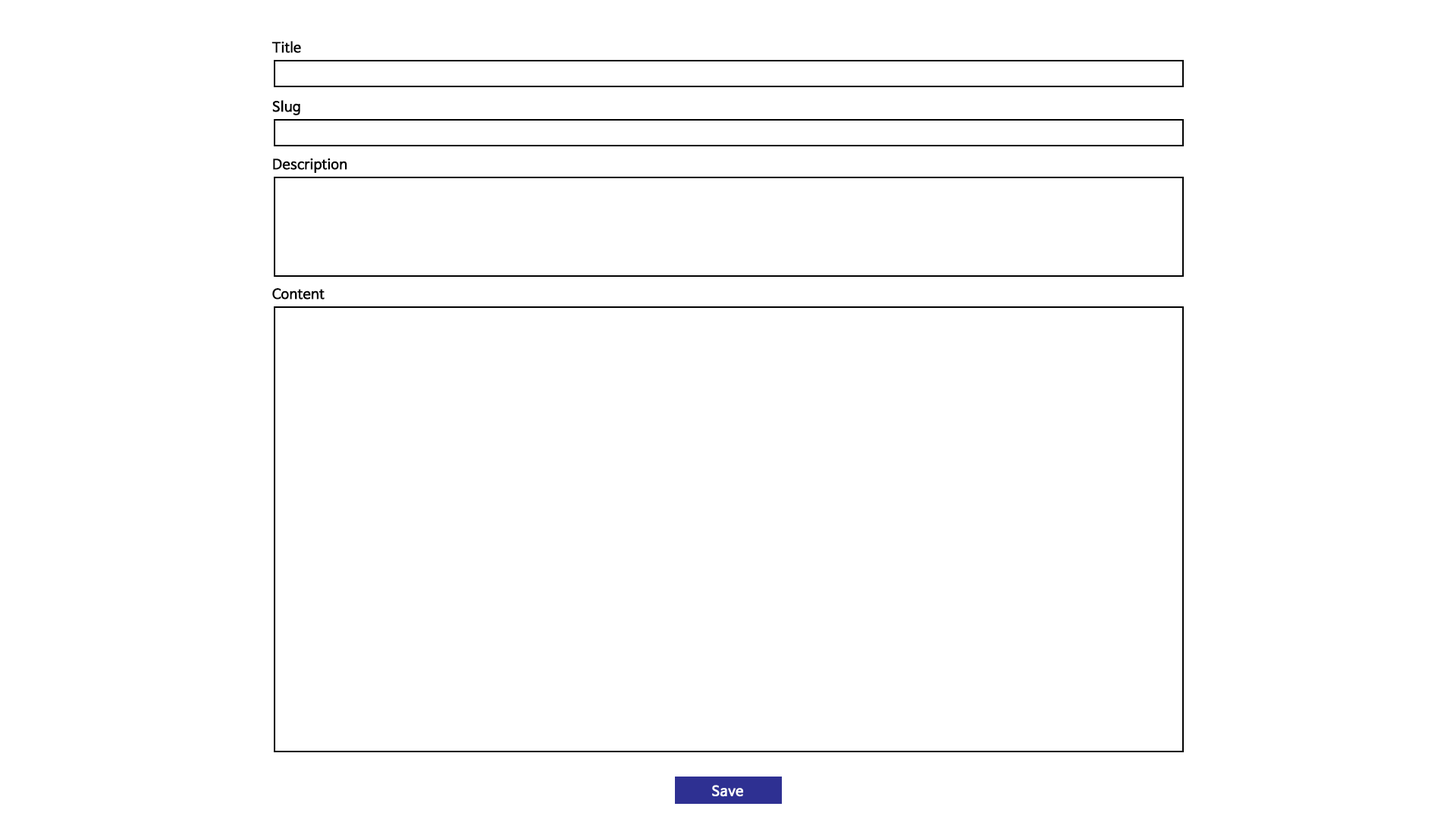
<style>
.page{position:relative;width:1456px;height:819px;background:#ffffff}
.page>*{position:absolute;margin:0}
.t1{font:13.6px "NanumBarunGothic";color:#000000;font-weight:bold}
.t2{font:13.6px "NanumBarunGothic";color:#ffffff;font-weight:bold}
</style>
<div class="page">
<p class="t1" style="left:271px;top:41px;width:30px;height:12px">Title</p>
<p class="t1" style="left:272px;top:100px;width:28px;height:15px">Slug</p>
<p class="t1" style="left:273px;top:158px;width:74px;height:15px">Description</p>
<p class="t1" style="left:272px;top:288px;width:53px;height:12px">Content</p>
<p class="t2" style="left:712px;top:785px;width:31px;height:12px">Save</p>
</div>
